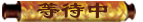
<style>
.page{position:relative;width:143px;height:22px}
.page>*{position:absolute;margin:0}
.t1{font:24px "LiSu";color:#561f14;font-weight:bold}
</style>
<div class="page">
<p class="t1" style="left:36px;top:2px;width:72px;height:17px">等待中</p>
</div>
